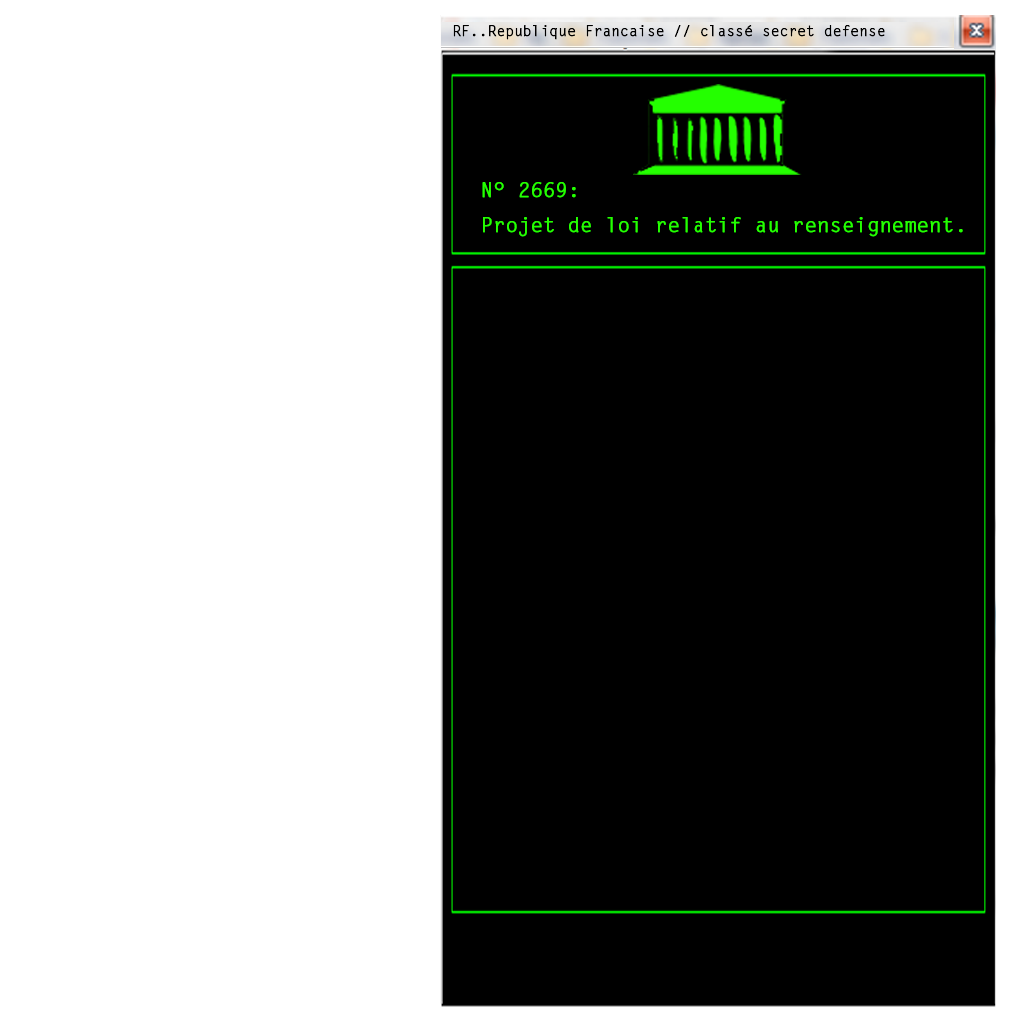
<style>
.page{position:relative;width:1024px;height:1024px;background:#000000}
.page>*{position:absolute;margin:0}
.t1{font:25px "LetterGothicStd";letter-spacing:-0.02em;color:#000000;font-weight:bold}
.t2{font:35px/35.6px "LetterGothicStd";letter-spacing:-0.02em;color:#24ff00;font-weight:bold}
</style>
<div class="page">
<p class="t1" style="left:453px;top:25px;width:432px;height:15px">RF..Republique Francaise // classé secret defense</p>
<p class="t2" style="left:482px;top:182px;width:481px;height:55px">N° 2669: <br>Projet de loi relatif au renseignement.</p>
</div>
